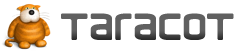
<style>
.page{position:relative;width:235px;height:51px;background:#ffffff}
.page>*{position:absolute;margin:0}
.t1{font:72px "Finder";color:#606060}
</style>
<div class="page">
<p class="t1" style="left:61px;top:13px;width:173px;height:27px">taracot</p>
</div>
